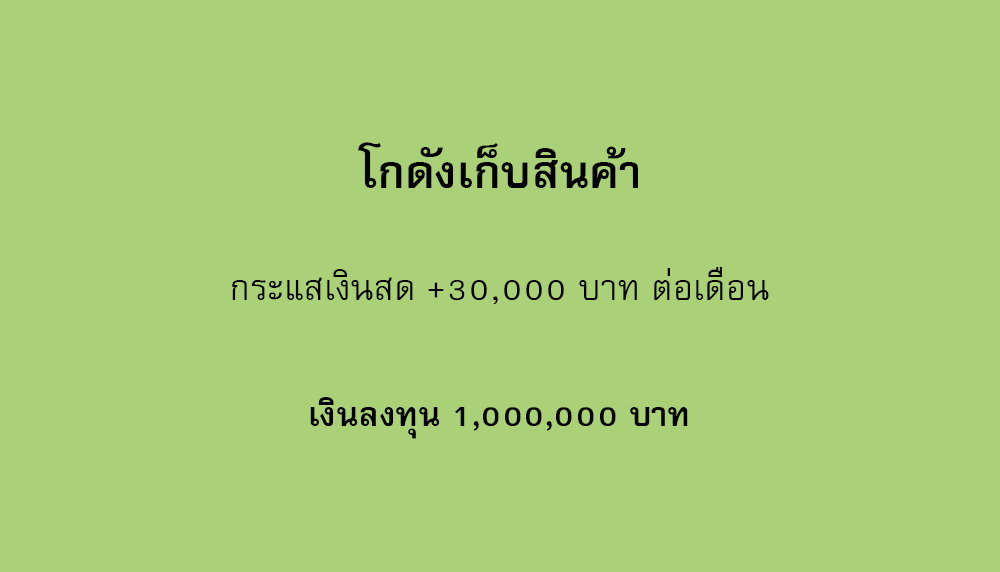
<style>
.page{position:relative;width:1000px;height:572px;background:#aad178}
.page>*{position:absolute;margin:0}
.t1{font:64px "FreesiaUPCBold";color:#000000}
.t2{font:50px "FreesiaUPC";color:#000000}
.t3{font:47px "FreesiaUPCBold";color:#000000}
</style>
<div class="page">
<p class="t1" style="left:358px;top:142px;width:280px;height:46px">โกดังเก็บสินค้า</p>
<p class="t2" style="left:232px;top:267px;width:537px;height:38px">กระแสเงินสด +30,000 บาท ต่อเดือน</p>
<p class="t3" style="left:310px;top:397px;width:378px;height:42px">เงินลงทุน 1,000,000 บาท</p>
</div>
